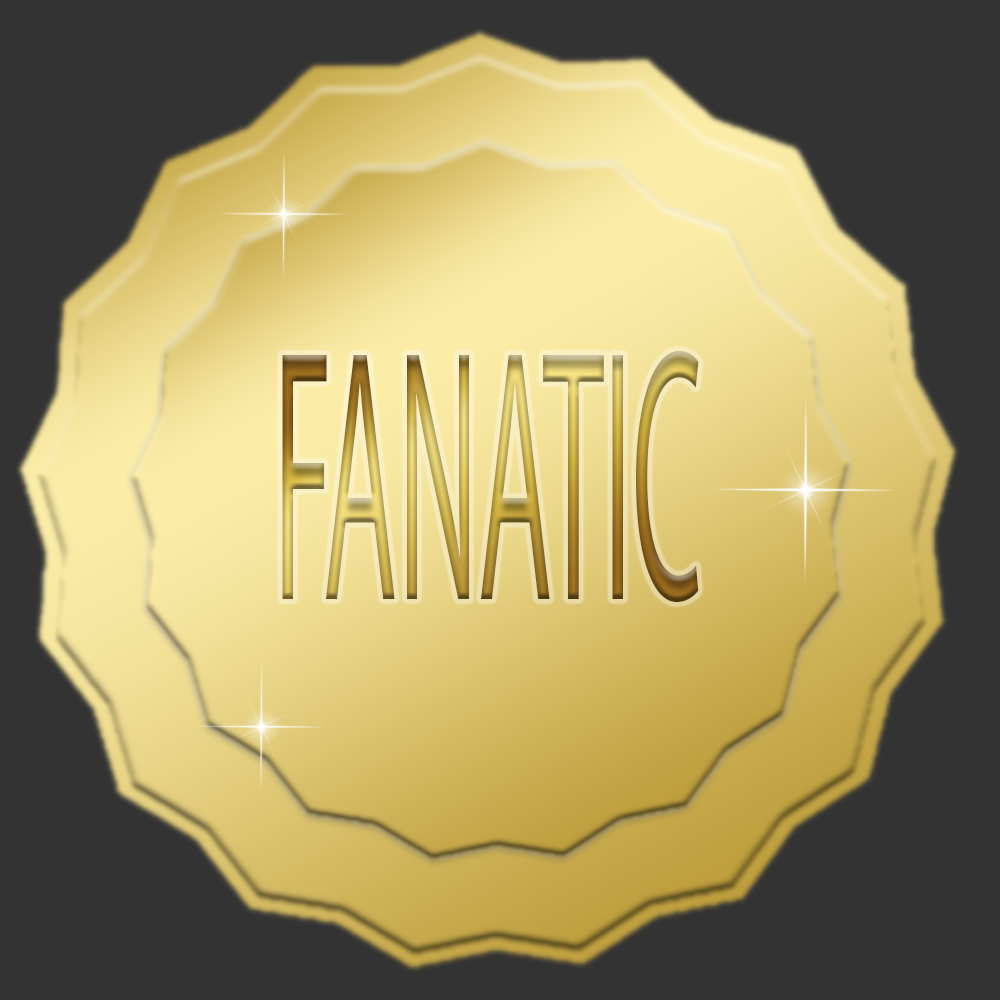
<style>
.page{position:relative;width:1000px;height:1000px;background:#333333}
.page>*{position:absolute;margin:0}
.t1{font:361.4px "MyriadPro-Regular";scale:0.34 1}
</style>
<div class="page">
<p class="t1" style="left:282px;top:350px;width:417px;height:253px">FANATIC</p>
</div>
